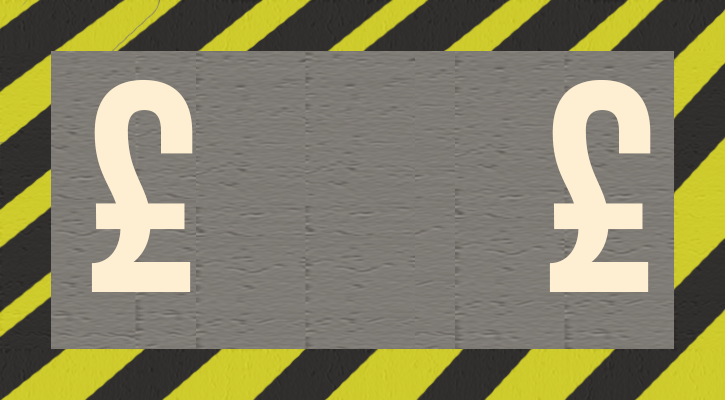
<style>
.page{position:relative;width:725px;height:400px}
.page>*{position:absolute;margin:0}
.t1{font:300px "BebasNeueBold";color:#feefd2}
</style>
<div class="page">
<p class="t1" style="left:91px;top:80px;width:102px;height:212px">£</p>
<p class="t1" style="left:549px;top:80px;width:102px;height:212px">£</p>
</div>
